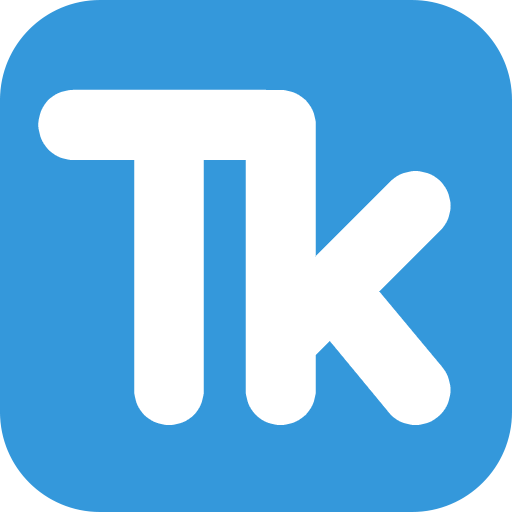
<style>
.page{position:relative;width:512px;height:512px;background:#3498db}
.page>*{position:absolute;margin:0}
.t1{font:450px "Quicksand-Bold";color:#ffffff}
</style>
<div class="page">
<p class="t1" style="left:48px;top:99px;width:243px;height:316px">T</p>
<p class="t1" style="left:255px;top:100px;width:186px;height:315px">k</p>
</div>
